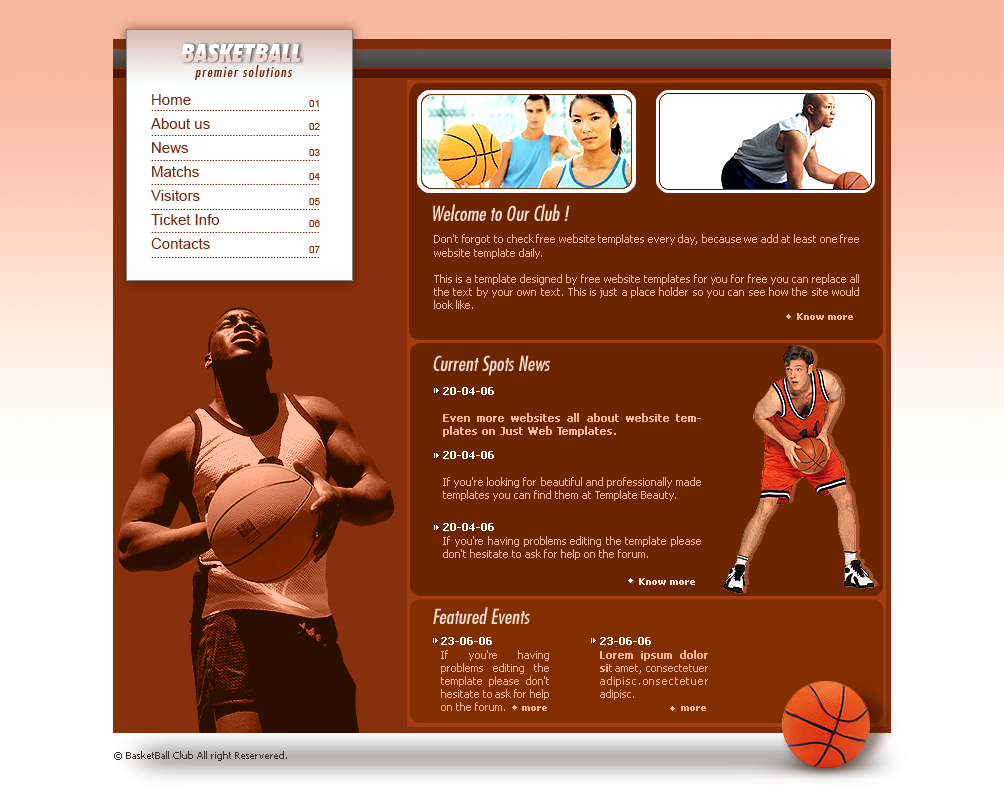
<style>
.page{position:relative;width:1004px;height:800px;background:#6c2401}
.page>*{position:absolute;margin:0}
.t1{font:25px "FuturaBT-ExtraBlackCondItalic"}
.t2{font:14px "FuturaMdCnBTItalic";letter-spacing:0.1em;color:#6b2a10}
.t3{font:15px/24px "ArialMT";color:#762a0c}
.t4{font:10px "ArialMT";color:#8a2800}
.t5{font:20px "FuturaMdCnBTItalic";color:#f3ded4}
.t6{font:11px "Tahoma";color:#f4b79a}
.t7{font:10px "Tahoma-Bold";color:#f4b79a}
.t8{font:11px "Tahoma";color:#f4b79a;font-weight:bold}
.t9{font:11px "Tahoma-Bold";color:#ffffff}
.t10{font:10px "Tahoma-Bold";color:#f3ded4}
.t11{font:10px "Tahoma";color:#362e2b}
</style>
<div class="page">
<p class="t1" style="left:180px;top:44px;width:121px;height:18px">BASKETBALL</p>
<p class="t2" style="left:195px;top:65px;width:97px;height:15px">premier solutions</p>
<p class="t3" style="left:151px;top:94px;width:69px;height:155px;text-align:justify">Home<br>About us<br>News<br>Matchs<br>Visitors<br>Ticket Info<br>Contacts</p>
<p class="t4" style="left:309px;top:100px;width:10px;height:7px">01</p>
<p class="t4" style="left:309px;top:123px;width:11px;height:7px">02</p>
<p class="t4" style="left:309px;top:149px;width:11px;height:7px">03</p>
<p class="t4" style="left:309px;top:173px;width:11px;height:7px">04</p>
<p class="t4" style="left:309px;top:198px;width:11px;height:7px">05</p>
<p class="t5" style="left:433px;top:204px;width:137px;height:17px">Welcome to Our Club !</p>
<p class="t4" style="left:309px;top:220px;width:11px;height:7px">06</p>
<p class="t4" style="left:309px;top:246px;width:11px;height:7px">07</p>
<p class="t6" style="left:434px;top:234px;width:425px;height:75px;text-align:justify">Don't forgot to check free website templates every day, because we add at least one free website template daily.<br><br>This is a template designed by free website templates for you for free you can replace all the text by your own text. This is just a place holder so you can see how the site would look like.<br><br>You can remove any link to our websites from this template you're free to use the template without linking back to us. Don't want your boss to know you used a free website template ;) .</p>
<p class="t7" style="left:797px;top:313px;width:56px;height:7px">Know more</p>
<p class="t5" style="left:433px;top:355px;width:117px;height:21px">Current Spots News</p>
<p class="t8" style="left:443px;top:387px;width:258px;height:50px"><span class="t9">20-04-06<br><br></span>Even more websites all about website templates on Just Web Templates.</p>
<p class="t6" style="left:443px;top:451px;width:258px;height:50px"><span class="t9">20-04-06<br><br></span>If you're looking for beautiful and professionally made templates you can find them at Template Beauty.</p>
<p class="t6" style="left:443px;top:523px;width:258px;height:37px"><span class="t9">20-04-06<br></span>If you're having problems editing the template please don't hesitate to ask for help on the forum.</p>
<p class="t10" style="left:639px;top:578px;width:56px;height:7px">Know more</p>
<p class="t5" style="left:433px;top:607px;width:97px;height:17px">Featured Events</p>
<p class="t6" style="left:441px;top:637px;width:108px;height:74px"><span class="t9">23-06-06<br></span>If you're having problems editing the template please don't hesitate to ask for help on the forum.    <span class="t7">more</span></p>
<p class="t6" style="left:600px;top:637px;width:108px;height:74px"><span class="t9">23-06-06<br></span><span class="t8">Lorem ipsum dolor si</span>t amet, consectetuer adipisc.onsectetuer adipisc. <br>     <span class="t7">more</span></p>
<p class="t11" style="left:114px;top:751px;width:173px;height:10px">© BasketBall Club All right Reservered.</p>
</div>
